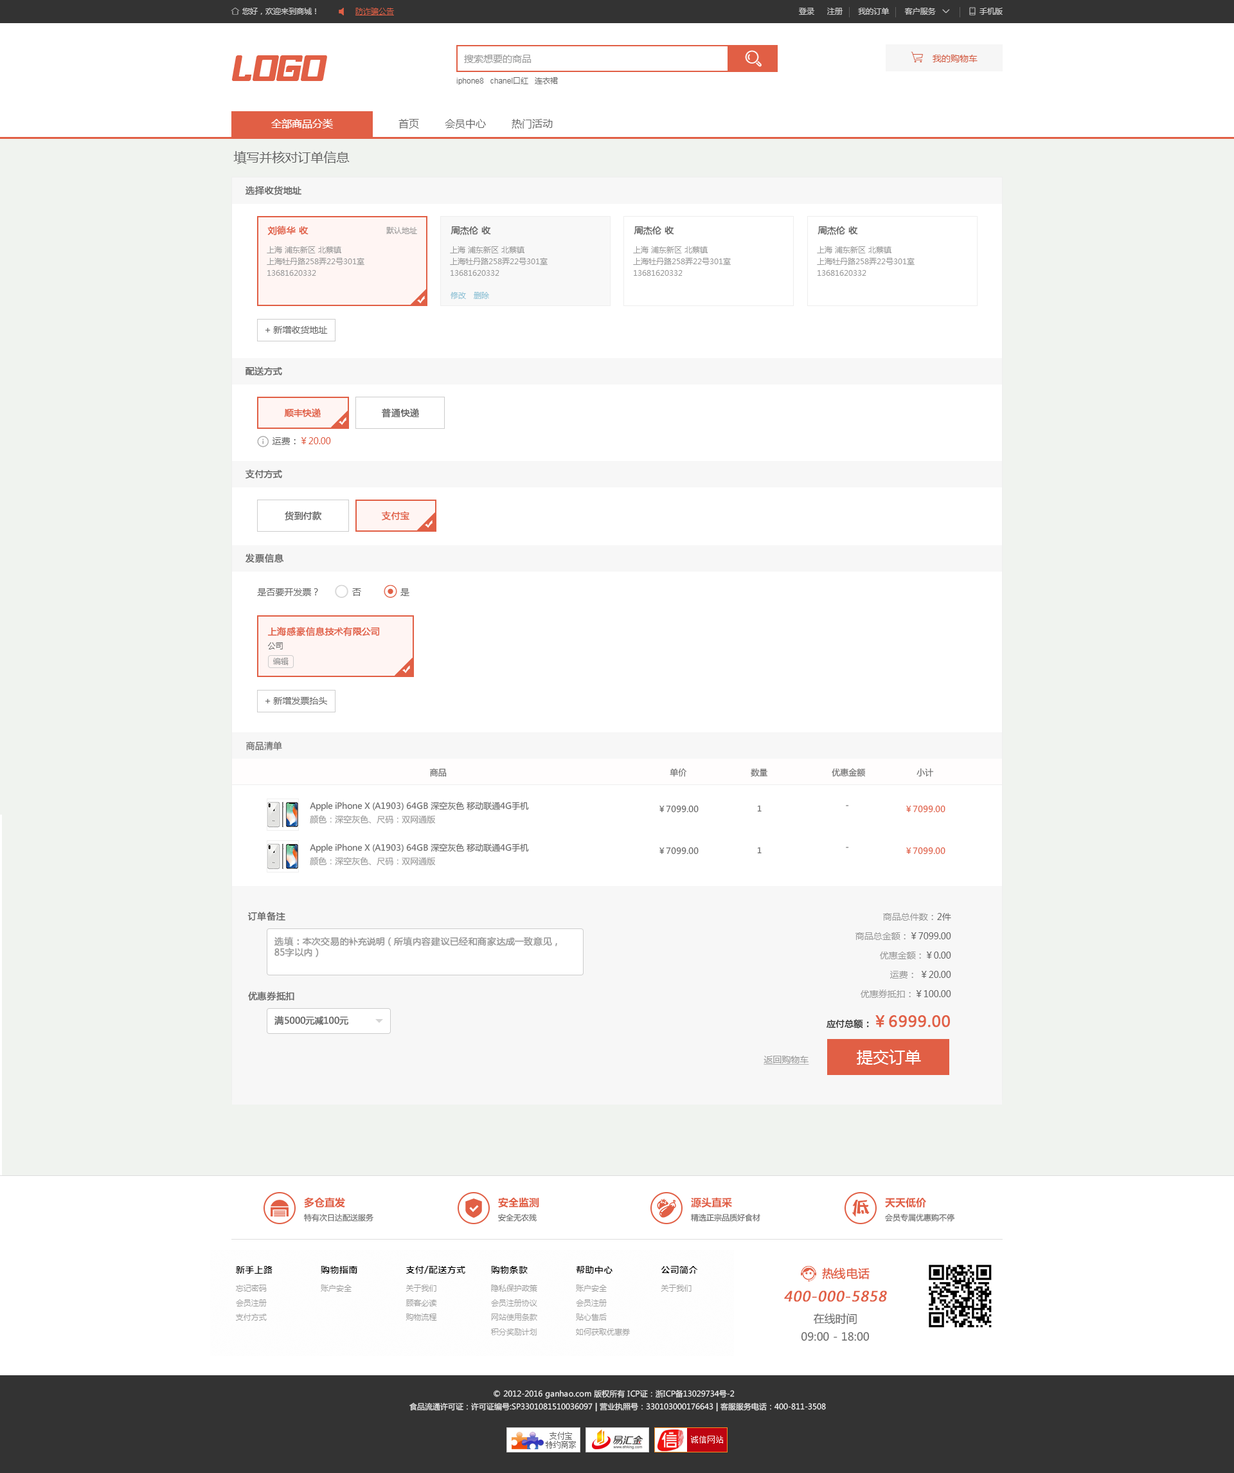
<style>
.page{position:relative;width:1234px;height:1473px;background:#ffffff}
.page>*{position:absolute;margin:0}
.t1{font:12.9px "MicrosoftYaHei";color:#666666}
.t2{font:9px "MicrosoftYaHei";color:#666666;font-weight:bold}
.t3{font:9px "MicrosoftYaHei";color:#e15f45;font-weight:bold}
.t4{font:7.7px "MicrosoftYaHei";color:#999999}
.t5{font:7.7px/11.6px "MicrosoftYaHei";color:#999999}
.t6{font:7.7px "MicrosoftYaHei";color:#8ec2d6}
.t7{font:9px "MicrosoftYaHei";color:#666666}
.t8{font:9px "MicrosoftYaHei";color:#e15f45}
.t9{font:7.7px "MicrosoftYaHei";color:#666666}
.t10{font:8.4px "MicrosoftYaHei";color:#666666}
.t11{font:8.4px "MicrosoftYaHei"}
.t12{font:8.4px "MicrosoftYaHei";color:#e15f45}
.t13{font:8.4px "MicrosoftYaHei";color:#999999}
.t14{font:9px/19.3px "MicrosoftYaHei";color:#666666}
.t15{font:9px/19.3px "MicrosoftYaHei";color:#999999}
.t16{font:9px/10.3px "MicrosoftYaHei";color:#333333;font-weight:bold}
.t17{font:15.4px/10.3px "MicrosoftYaHei";color:#e15f45;font-weight:bold}
.t18{font:9px "MicrosoftYaHei";color:#999999;font-weight:bold}
.t19{font:16.1px "MicrosoftYaHei";color:#ffffff}
.t20{font:9px "MicrosoftYaHei";color:#999999;text-decoration:underline}
.t21{font:10.3px "MicrosoftYaHei-Bold";color:#e15f45}
.t22{font:11.6px "MicrosoftYaHei";color:#e15f45;font-weight:bold}
.t23{font:13.8px "MicrosoftYaHei";color:#e15f45;font-weight:bold;font-style:italic}
.t24{font:10.9px/17.9px "MicrosoftYaHei";color:#666666}
.t25{font:7.7px/12.9px "MicrosoftYaHei";color:#eeeeee}
</style>
<div class="page">
<p class="t1" style="left:233px;top:151px;width:117px;height:13px">填写并核对订单信息</p>
<p class="t2" style="left:246px;top:186px;width:56px;height:9px">选择收货地址</p>
<p class="t3" style="left:267px;top:226px;width:42px;height:9px">刘德华 收</p>
<p class="t4" style="left:386px;top:227px;width:31px;height:7px">默认地址</p>
<p class="t2" style="left:451px;top:226px;width:40px;height:9px">周杰伦 收</p>
<p class="t2" style="left:634px;top:226px;width:40px;height:9px">周杰伦 收</p>
<p class="t2" style="left:818px;top:226px;width:40px;height:9px">周杰伦 收</p>
<p class="t5" style="left:267px;top:246px;width:97px;height:30px">上海 浦东新区 北蔡镇 <br>上海牡丹路258弄22号301室<br>13681620332</p>
<p class="t5" style="left:450px;top:246px;width:98px;height:30px">上海 浦东新区 北蔡镇 <br>上海牡丹路258弄22号301室<br>13681620332</p>
<p class="t5" style="left:633px;top:246px;width:98px;height:30px">上海 浦东新区 北蔡镇 <br>上海牡丹路258弄22号301室<br>13681620332</p>
<p class="t5" style="left:817px;top:246px;width:98px;height:30px">上海 浦东新区 北蔡镇 <br>上海牡丹路258弄22号301室<br>13681620332</p>
<p class="t6" style="left:451px;top:292px;width:38px;height:7px">修改   删除</p>
<p class="t7" style="left:266px;top:326px;width:62px;height:8px">+ 新增收货地址</p>
<p class="t2" style="left:245px;top:366px;width:37px;height:9px">配送方式</p>
<p class="t3" style="left:284px;top:408px;width:37px;height:9px">顺丰快递</p>
<p class="t2" style="left:381px;top:408px;width:38px;height:10px">普通快递</p>
<p class="t8" style="left:273px;top:437px;width:58px;height:8px"><span class="t7">运费：</span>￥20.00</p>
<p class="t2" style="left:246px;top:469px;width:36px;height:10px">支付方式</p>
<p class="t2" style="left:285px;top:511px;width:37px;height:10px">货到付款</p>
<p class="t3" style="left:382px;top:511px;width:28px;height:10px">支付宝</p>
<p class="t2" style="left:246px;top:554px;width:38px;height:9px">发票信息</p>
<p class="t7" style="left:257px;top:588px;width:61px;height:8px">是否要开发票？</p>
<p class="t7" style="left:352px;top:588px;width:9px;height:8px">否</p>
<p class="t7" style="left:401px;top:588px;width:9px;height:8px">是</p>
<p class="t3" style="left:267px;top:627px;width:113px;height:9px">上海感豪信息技术有限公司</p>
<p class="t9" style="left:268px;top:642px;width:15px;height:7px">公司</p>
<p class="t4" style="left:273px;top:658px;width:16px;height:7px">编辑</p>
<p class="t7" style="left:266px;top:697px;width:61px;height:8px">+ 新增发票抬头</p>
<p class="t7" style="left:246px;top:741px;width:36px;height:10px">商品清单</p>
<p class="t10" style="left:429px;top:768px;width:505px;height:9px">商品                                                                                       单价                         数量                         优惠金额                    小计</p>
<p class="t10" style="left:310px;top:802px;width:219px;height:9px">Apple iPhone X (A1903) 64GB 深空灰色 移动联通4G手机</p>
<p class="t10" style="left:660px;top:805px;width:39px;height:8px">￥7099.00</p>
<p class="t9" style="left:757px;top:805px;width:5px;height:7px">1</p>
<p class="t11" style="left:846px;top:805px;width:3px;height:1px">-</p>
<p class="t12" style="left:906px;top:805px;width:40px;height:8px">￥7099.00</p>
<p class="t13" style="left:310px;top:815px;width:125px;height:9px">颜色：深空灰色、尺码：双网通版</p>
<p class="t10" style="left:310px;top:843px;width:219px;height:10px">Apple iPhone X (A1903) 64GB 深空灰色 移动联通4G手机</p>
<p class="t13" style="left:310px;top:857px;width:125px;height:8px">颜色：深空灰色、尺码：双网通版</p>
<p class="t10" style="left:660px;top:847px;width:39px;height:7px">￥7099.00</p>
<p class="t9" style="left:757px;top:847px;width:5px;height:7px">1</p>
<p class="t11" style="left:846px;top:847px;width:3px;height:1px">-</p>
<p class="t12" style="left:906px;top:847px;width:40px;height:7px">￥7099.00</p>
<p class="t2" style="left:248px;top:912px;width:37px;height:9px">订单备注</p>
<p class="t14" style="left:827px;top:913px;width:124px;height:116px;text-align:right"><span class="t15">商品总件数：</span>2件<br><span class="t15">商品总金额：</span>￥7099.00<br><span class="t15">优惠金额：</span>￥0.00<br><span class="t15">运费：</span> ￥20.00<br><span class="t15">优惠券抵扣：</span>￥100.00<br><br><span class="t16">应付总额：</span><span class="t17">￥6999.00</span></p>
<p class="t18" style="left:274px;top:937px;width:283px;height:20px">选填：本次交易的补充说明（所填内容建议已经和商家达成一致意见，<br>85字以内）</p>
<p class="t2" style="left:248px;top:991px;width:46px;height:10px">优惠券抵扣</p>
<p class="t2" style="left:274px;top:1016px;width:75px;height:9px">满5000元减100元</p>
<p class="t19" style="left:857px;top:1049px;width:64px;height:16px">提交订单</p>
<p class="t20" style="left:764px;top:1056px;width:45px;height:9px">返回购物车</p>
<p class="t21" style="left:304px;top:1197px;width:41px;height:11px">多仓直发</p>
<p class="t21" style="left:498px;top:1197px;width:41px;height:11px">安全监测</p>
<p class="t21" style="left:691px;top:1197px;width:41px;height:11px">源头直采</p>
<p class="t21" style="left:885px;top:1197px;width:41px;height:11px">天天低价</p>
<p class="t9" style="left:304px;top:1213px;width:70px;height:8px">特有次日达配送服务</p>
<p class="t9" style="left:498px;top:1213px;width:39px;height:8px">安全无农残</p>
<p class="t9" style="left:691px;top:1213px;width:69px;height:8px">精选正宗品质好食材</p>
<p class="t9" style="left:885px;top:1213px;width:70px;height:8px">会员专属优惠购不停</p>
<p class="t22" style="left:822px;top:1268px;width:48px;height:11px">热线电话</p>
<p class="t23" style="left:784px;top:1290px;width:103px;height:12px">400-000-5858</p>
<p class="t24" style="left:801px;top:1313px;width:69px;height:28px;text-align:center">在线时间<br>09:00 - 18:00</p>
<p class="t25" style="left:410px;top:1389px;width:416px;height:23px;text-align:center">© 2012-2016 ganhao.com 版权所有 ICP证：浙ICP备13029734号-2   <br>食品流通许可证：许可证编号:SP3301081510036097 | 营业执照号：330103000176643 | 客服服务电话：400-811-3508</p>
</div>
